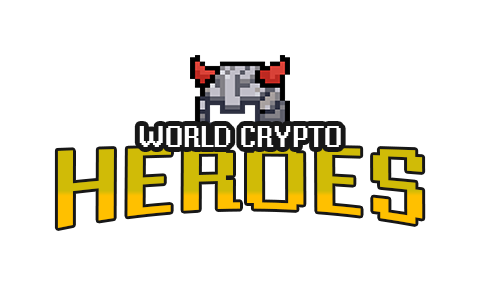
<style>
.page{position:relative;width:480px;height:300px;background:#ffffff}
.page>*{position:absolute;margin:0}
.t1{font:30px "MisterPixel16pt-Regular";color:#ffffff}
.t2{font:112px "MisterPixel16pt-Regular"}
</style>
<div class="page">
<p class="t1" style="left:139px;top:126px;width:202px;height:21px">WORLD CRYPTO</p>
<p class="t2" style="left:57px;top:147px;width:366px;height:81px">HEROES</p>
</div>
